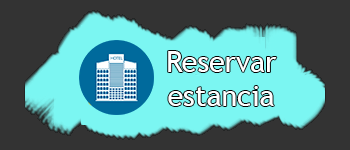
<style>
.page{position:relative;width:350px;height:150px;background:#333333}
.page>*{position:absolute;margin:0}
.t1{font:28.9px "TrebuchetMS";color:#ffffff}
</style>
<div class="page">
<p class="t1" style="left:168px;top:51px;width:109px;height:55px;text-align:center">Reservar <br>estancia</p>
</div>
